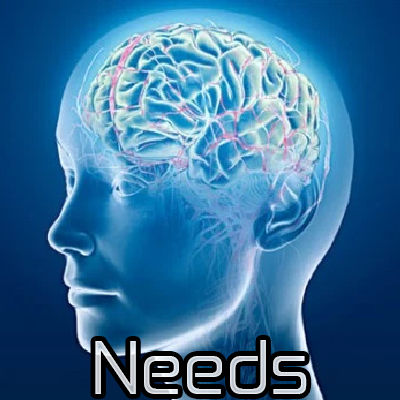
<style>
.page{position:relative;width:400px;height:400px}
.page>*{position:absolute;margin:0}
.t1{font:72px "ZektonRg-Regular";color:#d4dae1}
</style>
<div class="page">
<p class="t1" style="left:95px;top:340px;width:212px;height:54px">Needs</p>
</div>
